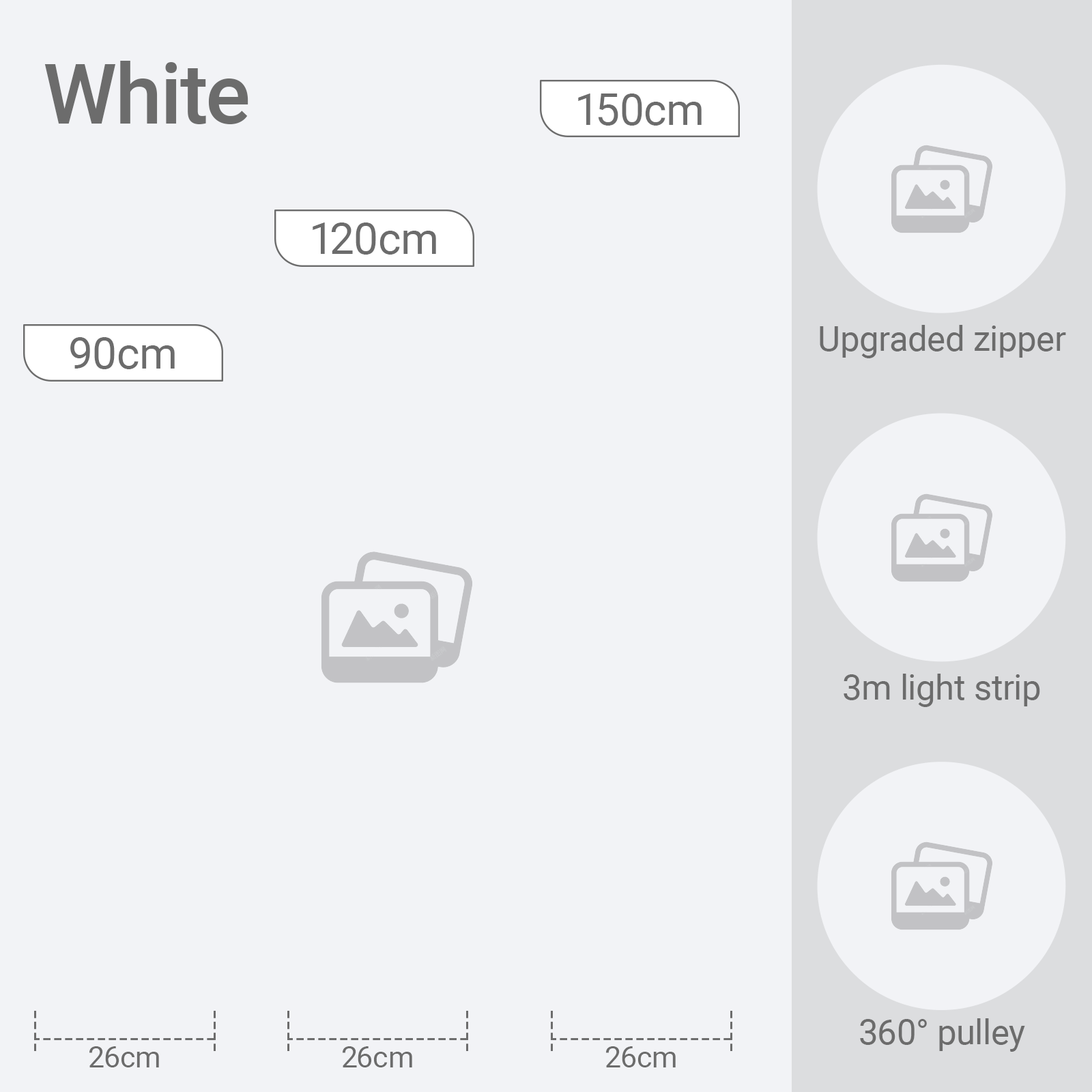
<style>
.page{position:relative;width:1092px;height:1092px;background:#f2f3f6}
.page>*{position:absolute;margin:0}
.t1{font:83.7px "Roboto-Medium";color:#6c6c6c}
.t2{font:43.7px "Roboto-Regular";color:#6c6c6c}
.t3{font:34.6px "Roboto-Regular";color:#6c6c6c}
.t4{font:29.1px "Roboto-Regular";color:#6c6c6c}
</style>
<div class="page">
<p class="t1" style="left:44px;top:61px;width:204px;height:63px">White</p>
<p class="t2" style="left:578px;top:94px;width:124px;height:32px">150cm</p>
<p class="t2" style="left:313px;top:222px;width:123px;height:33px">120cm</p>
<p class="t3" style="left:820px;top:325px;width:246px;height:33px">Upgraded zipper</p>
<p class="t2" style="left:70px;top:337px;width:105px;height:32px">90cm</p>
<p class="t3" style="left:844px;top:674px;width:196px;height:33px">3m light strip</p>
<p class="t3" style="left:860px;top:1018px;width:165px;height:34px">360° pulley</p>
<p class="t4" style="left:89px;top:1046px;width:70px;height:21px">26cm</p>
<p class="t4" style="left:343px;top:1046px;width:69px;height:21px">26cm</p>
<p class="t4" style="left:606px;top:1046px;width:70px;height:21px">26cm</p>
</div>
